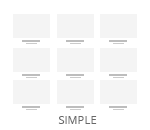
<style>
.page{position:relative;width:150px;height:130px;background:#ffffff}
.page>*{position:absolute;margin:0}
.t1{font:11px "OpenSans";color:#686868;text-transform:uppercase}
</style>
<div class="page">
<p class="t1" style="left:58px;top:116px;width:39px;height:8px">Simple</p>
</div>
